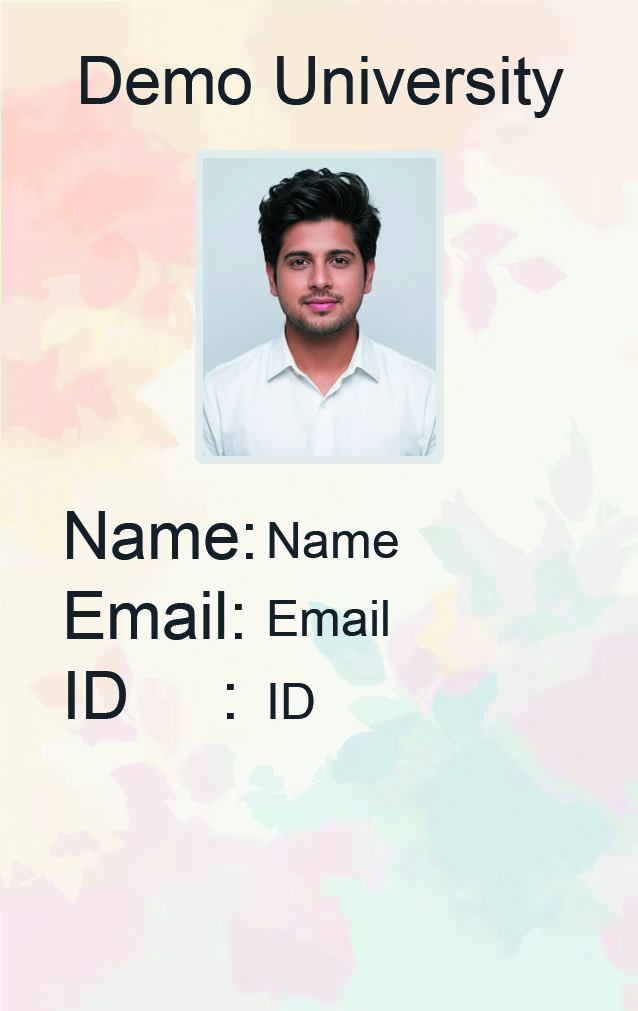
<style>
.page{position:relative;width:638px;height:1011px}
.page>*{position:absolute;margin:0}
.t1{font:66.7px "ArialMT";color:#141f27}
.t2{font:50px "ArialMT";color:#141f27}
</style>
<div class="page">
<p class="t1" style="left:81px;top:56px;width:483px;height:62px">Demo University</p>
<p class="t1" style="left:67px;top:511px;width:186px;height:208px">Name:<br>Email:<br>ID     :</p>
<p class="t2" style="left:269px;top:522px;width:129px;height:36px">Name</p>
<p class="t2" style="left:269px;top:600px;width:119px;height:36px">Email</p>
<p class="t2" style="left:270px;top:683px;width:44px;height:36px">ID</p>
</div>
